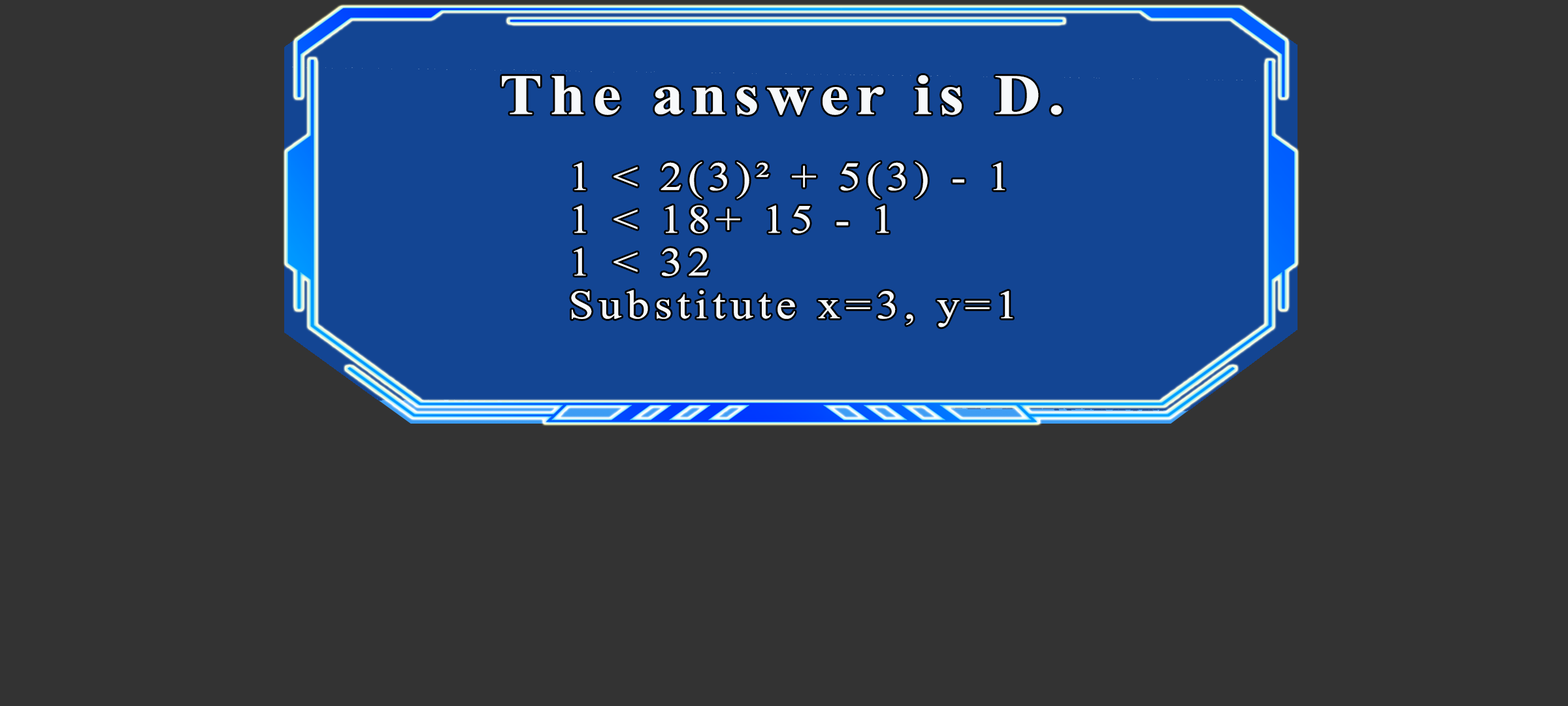
<style>
.page{position:relative;width:1568px;height:706px;background:#333333}
.page>*{position:absolute;margin:0}
.t1{font:57.2px "TimesNewRomanPS-BoldMT";letter-spacing:0.115em;color:#f7f9fb;scale:1.12 1}
.t2{font:40.3px/42.7px "TimesNewRomanPSMT";letter-spacing:0.115em;color:#f7f9fb;scale:1.12 1}
</style>
<div class="page">
<p class="t1" style="left:502px;top:75px;width:560px;height:40px">The answer is D.</p>
<p class="t2" style="left:571px;top:161px;width:442px;height:166px">1 &lt; 2(3)² + 5(3) - 1<br>1 &lt; 18+ 15 - 1<br>1 &lt; 32<br>Substitute x=3, y=1</p>
</div>
